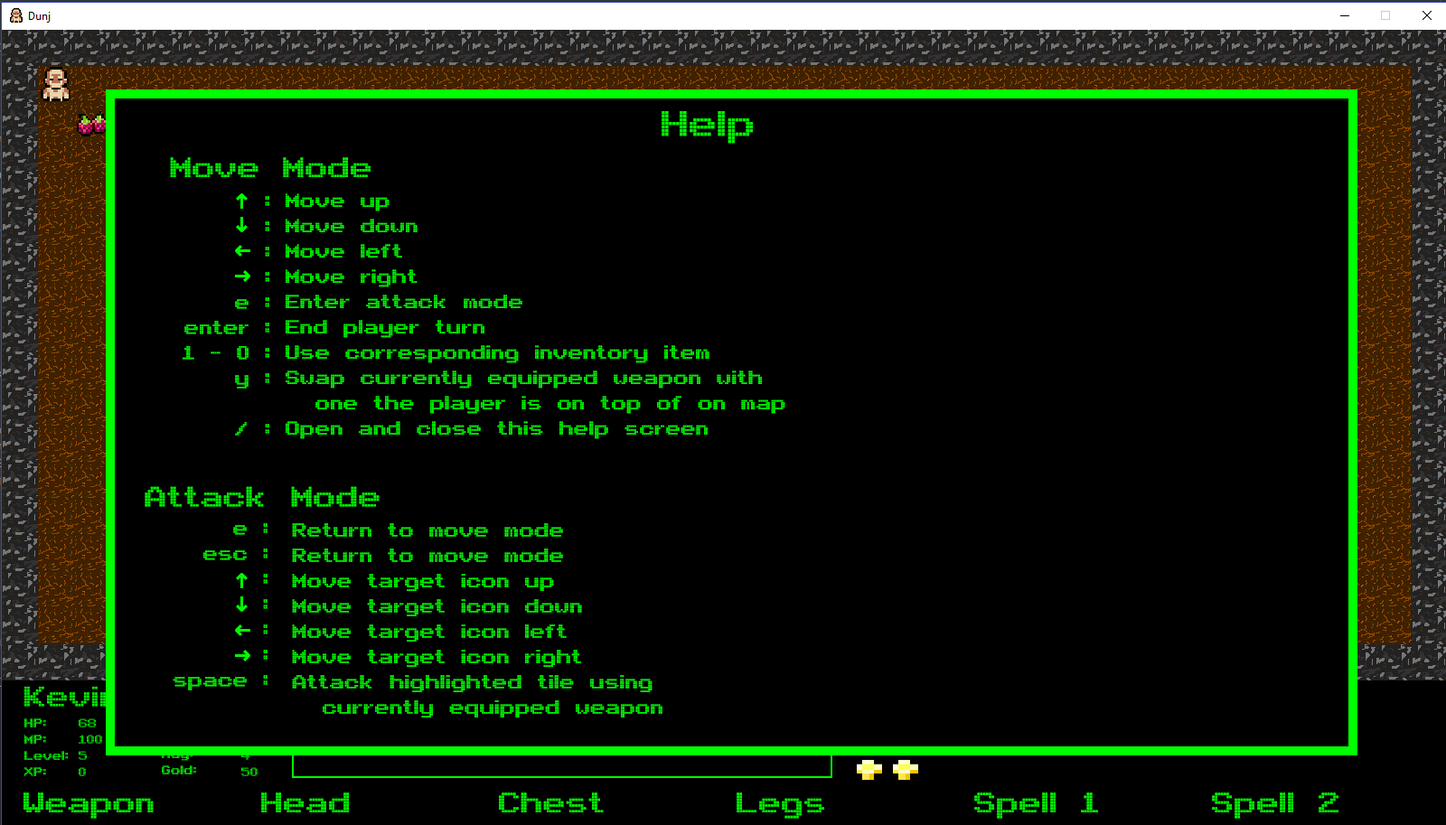
<style>
.page{position:relative;width:1446px;height:825px;background:#000000}
.page>*{position:absolute;margin:0}
.t1{font:54.2px "Arcade";color:#00ff00}
.t2{font:43.4px "Arcade";color:#00ff00}
.t3{font:28.9px/25.3px "Arcade";color:#00ff00}
</style>
<div class="page">
<p class="t1" style="left:661px;top:111px;width:92px;height:33px">Help</p>
<p class="t2" style="left:170px;top:157px;width:200px;height:20px">Move Mode</p>
<p class="t3" style="left:183px;top:196px;width:86px;height:239px;text-align:right">:<br> :<br> :<br> :<br>e :<br>enter :<br>1 - 0 :<br>y :<br><br>/ :</p>
<p class="t3" style="left:286px;top:193px;width:499px;height:246px">Move up<br>Move down<br>Move left<br>Move right<br>Enter attack mode<br>End player turn<br>Use corresponding inventory item<br>Swap currently equipped weapon with <br>  one the player is on top of on map<br>Open and close this help screen</p>
<p class="t2" style="left:145px;top:486px;width:234px;height:21px">Attack Mode</p>
<p class="t3" style="left:173px;top:523px;width:94px;height:167px;text-align:right">e :<br>esc :<br> :<br> :<br> :<br> :<br>space :</p>
<p class="t3" style="left:292px;top:523px;width:370px;height:194px">Return to move mode<br>Return to move mode<br>Move target icon up<br>Move target icon down<br>Move target icon left<br>Move target icon right<br>Attack highlighted tile using <br>  currently equipped weapon</p>
</div>
